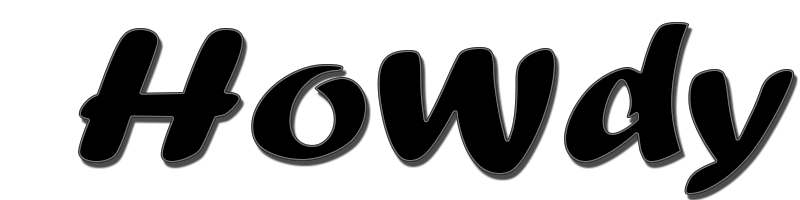
<style>
.page{position:relative;width:800px;height:200px;background:#ffffff}
.page>*{position:absolute;margin:0}
.t1{font:198.4px "ForteMT";color:#000000;scale:1.17 1}
.t2{font:238.1px "ForteMT";color:#000000;scale:1.17 1}
</style>
<div class="page">
<p class="t1" style="left:78px;top:22px;width:717px;height:173px">Ho<span class="t2">w</span>dy</p>
</div>
